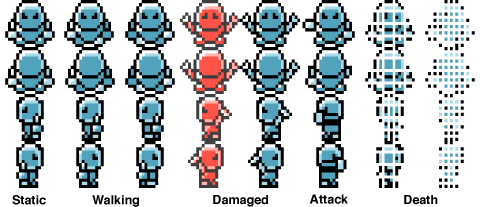
<style>
.page{position:relative;width:480px;height:207px;background:#ffffff}
.page>*{position:absolute;margin:0}
.t1{font:12.5px "Helvetica-Bold";color:#000000}
</style>
<div class="page">
<p class="t1" style="left:12px;top:195px;width:34px;height:10px">Static</p>
<p class="t1" style="left:92px;top:195px;width:47px;height:12px">Walking</p>
<p class="t1" style="left:213px;top:195px;width:55px;height:12px">Damaged</p>
<p class="t1" style="left:309px;top:194px;width:39px;height:10px">Attack</p>
<p class="t1" style="left:404px;top:195px;width:34px;height:10px">Death</p>
</div>
